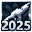
<style>
.page{position:relative;width:32px;height:32px}
.page>*{position:absolute;margin:0}
.t1{font:12px "MicrosoftYaHeiUI-Bold";color:#dfe0e6}
</style>
<div class="page">
<p class="t1" style="left:1px;top:20px;width:30px;height:11px">2025</p>
</div>
